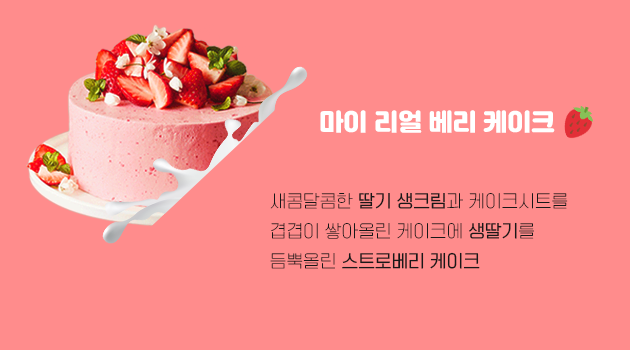
<style>
.page{position:relative;width:630px;height:350px;background:#ff8c8c}
.page>*{position:absolute;margin:0}
.t1{font:24px "Jalnan";color:#ffffff}
.t2{font:17px/30px "TTOmniGothicT";color:#181818}
.t3{font:17px/30px "TTOmniGothicM";color:#181818}
</style>
<div class="page">
<p class="t1" style="left:320px;top:110px;width:235px;height:23px">마이 리얼 베리 케이크</p>
<p class="t2" style="left:270px;top:192px;width:298px;height:77px">새콤달콤한 <span class="t3">딸기 생크림</span>과 케이크시트를 <br>겹겹이 쌓아올린 케이크에 <span class="t3">생딸기</span>를 <br>듬뿍올린<span class="t3"> 스트로베리 케이크</span></p>
</div>
